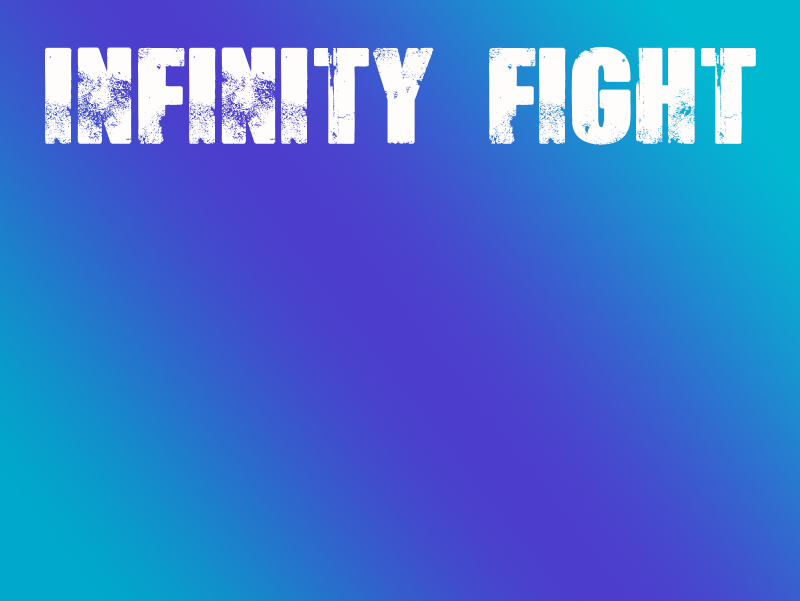
<style>
.page{position:relative;width:800px;height:601px}
.page>*{position:absolute;margin:0}
.t1{font:114.7px "Broken-Detroit";color:#fefdfc}
</style>
<div class="page">
<p class="t1" style="left:45px;top:46px;width:711px;height:99px">INFINITY FIGHT</p>
</div>
